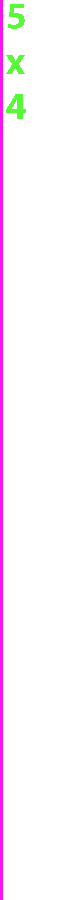
<style>
.page{position:relative;width:64px;height:900px;background:#ffffff}
.page>*{position:absolute;margin:0}
.t1{font:37.8px "MyriadPro-Bold";color:#57fa37}
</style>
<div class="page">
<p class="t1" style="left:6px;top:4px;width:20px;height:115px">5<br>х<br>4</p>
</div>
